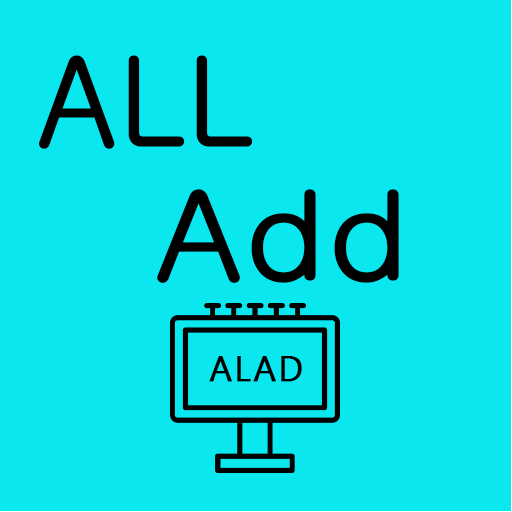
<style>
.page{position:relative;width:512px;height:512px;background:#0be7ef}
.page>*{position:absolute;margin:0}
.t1{font:120px "Gulim";color:#000000;font-weight:bold}
.t2{font:120px "Gulim";color:#000000;font-weight:bold;scale:1.1 1}
.t3{font:34.2px "MalgunGothic";letter-spacing:0.05em;color:#000000;font-weight:bold}
</style>
<div class="page">
<p class="t1" style="left:38px;top:55px;width:215px;height:94px">ALL</p>
<p class="t2" style="left:157px;top:189px;width:242px;height:94px">Add</p>
<p class="t3" style="left:209px;top:356px;width:93px;height:26px">ALAD</p>
</div>
